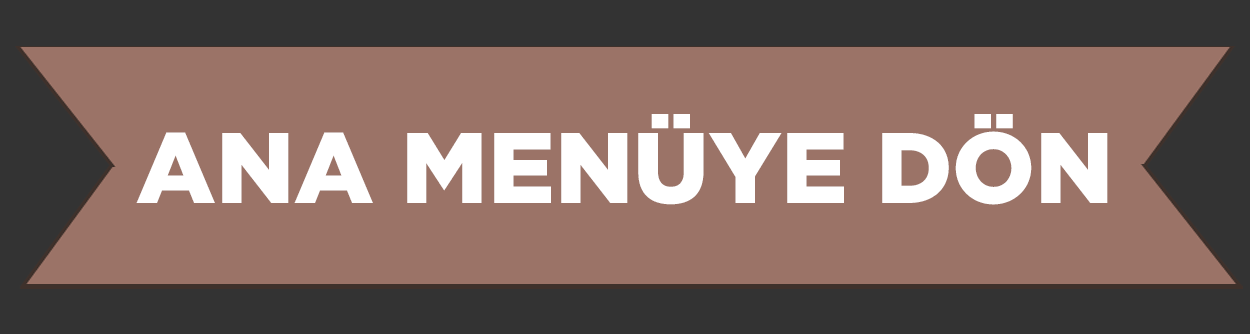
<style>
.page{position:relative;width:1250px;height:334px;background:#9b7367}
.page>*{position:absolute;margin:0}
.t1{font:100px "Gotham-Black";color:#ffffff}
</style>
<div class="page">
<p class="t1" style="left:136px;top:114px;width:972px;height:91px">ANA MENÜYE DÖN</p>
</div>
